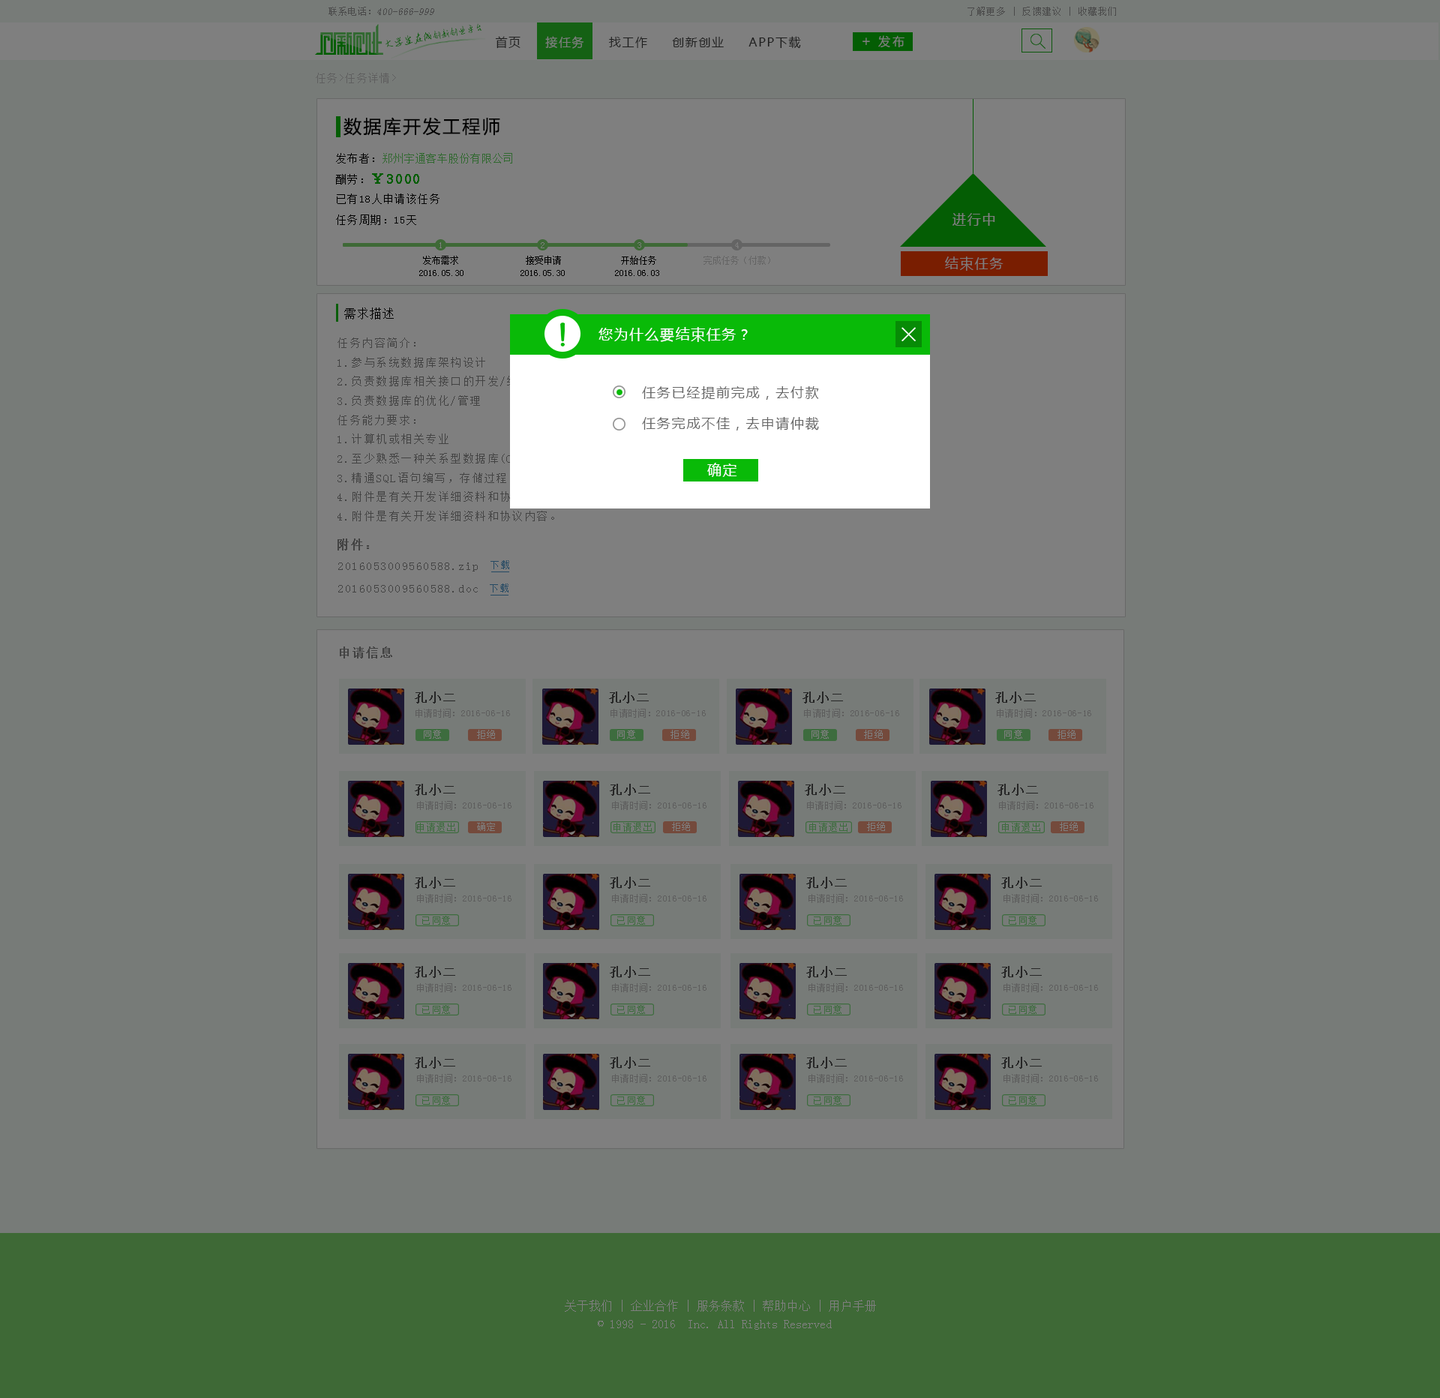
<style>
.page{position:relative;width:1440px;height:1398px;background:#777b78}
.page>*{position:absolute;margin:0}
.t1{font:10px "SimSun";color:#4a4a4a;font-style:italic}
.t2{font:10px "SimSun";color:#4a4a4a}
.t3{font:9px "SimSun";letter-spacing:0.1em;color:#4a4a4a}
.t4{font:9.3px "AnJingCheng-Xing-2.0";letter-spacing:-0.01em;color:#045d04}
.t5{font:10.4px "AnJingCheng-Xing-2.0";letter-spacing:-0.01em;color:#045d04}
.t6{font:12px "MicrosoftYaHei";letter-spacing:0.1em;color:#1f1f1f}
.t7{font:14px "MicrosoftYaHei";letter-spacing:0.2em;color:#7f7f7f}
.t8{font:12px "MicrosoftYaHei";letter-spacing:0.2em;color:#7f7f7f}
.t9{font:10.5px "SimSun";letter-spacing:0.1em;color:#5f5f5f}
.t10{font:18px "MicrosoftYaHei";letter-spacing:0.1em;color:#000000}
.t11{font:10.5px "SimSun";letter-spacing:0.05em;color:#316930}
.t12{font:10.5px "SimSun";letter-spacing:0.1em;color:#316930}
.t13{font:13.5px "SimSun";letter-spacing:0.1em;font-weight:bold}
.t14{font:10.5px "SimSun";letter-spacing:0.1em}
.t15{font:10.5px "SimSun";letter-spacing:0.1em;color:#000000}
.t16{font:13.5px "MicrosoftYaHei";letter-spacing:0.1em;color:#7f7f7f}
.t17{font:9px "SimSun";letter-spacing:0.1em;color:#7f7f7f}
.t18{font:9px "SimSun";color:#000000}
.t19{font:9px "SimSun";color:#646464}
.t20{font:13px "SimSun";color:#000000}
.t21{font:14px "MicrosoftYaHei";letter-spacing:0.1em;color:#ffffff}
.t22{font:11px "SimSun";letter-spacing:0.1em;color:#434343}
.t23{font:13.5px "MicrosoftYaHei";letter-spacing:0.1em;color:#676767}
.t24{font:12px "SimSun";letter-spacing:0.1em;color:#434343;font-weight:bold}
.t25{font:10px "SimSun";letter-spacing:0.1em;color:#254963}
.t26{font:12px "SimSun";letter-spacing:0.1em;color:#262626;font-weight:bold}
.t27{font:9px "SimSun";color:#5d5d5d}
.t28{font:9px "SimSun";letter-spacing:0.1em;color:#3d6c3e}
.t29{font:12px/18px "SimSun";color:#7f7f7f}
</style>
<div class="page">
<p class="t1" style="left:328px;top:7px;width:106px;height:9px"><span class="t2">联系电话：</span>400-666-999</p>
<p class="t3" style="left:967px;top:7px;width:149px;height:9px">了解更多 | 反馈建议 | 收藏我们</p>
<p class="t4" style="left:385px;top:23px;width:97px;height:24px;rotate:-10deg"><span class="t5">大学生在线</span>创新创业平台</p>
<p class="t6" style="left:495px;top:36px;width:306px;height:13px">首页     接任务     找工作     创新创业     APP下载</p>
<p class="t7" style="left:862px;top:37px;width:8px;height:8px">+</p>
<p class="t8" style="left:878px;top:35px;width:26px;height:12px">发布</p>
<p class="t9" style="left:316px;top:73px;width:80px;height:10px">任务&gt;任务详情&gt;</p>
<p class="t10" style="left:343px;top:117px;width:157px;height:19px">数据库开发工程师</p>
<p class="t11" style="left:336px;top:153px;width:176px;height:10px"><span class="t12">发布者：</span>郑州宇通客车股份有限公司</p>
<p class="t13" style="left:336px;top:173px;width:83px;height:11px"><span class="t14">酬劳：</span>￥3000</p>
<p class="t15" style="left:337px;top:193px;width:102px;height:11px">已有18人申请该任务</p>
<p class="t15" style="left:336px;top:214px;width:80px;height:11px">任务周期：15天</p>
<p class="t16" style="left:952px;top:213px;width:43px;height:13px">进行中</p>
<p class="t17" style="left:439px;top:242px;width:3px;height:6px">1</p>
<p class="t17" style="left:541px;top:242px;width:3px;height:6px">2</p>
<p class="t17" style="left:637px;top:242px;width:4px;height:6px">3</p>
<p class="t17" style="left:735px;top:242px;width:4px;height:6px">4</p>
<p class="t18" style="left:423px;top:256px;width:35px;height:9px">发布需求</p>
<p class="t18" style="left:526px;top:256px;width:35px;height:9px">接受申请</p>
<p class="t18" style="left:621px;top:256px;width:35px;height:9px">开始任务</p>
<p class="t19" style="left:703px;top:256px;width:67px;height:9px">完成任务（付款）</p>
<p class="t16" style="left:945px;top:256px;width:58px;height:15px">结束任务</p>
<p class="t18" style="left:419px;top:270px;width:44px;height:6px">2016.05.30</p>
<p class="t18" style="left:520px;top:270px;width:45px;height:6px">2016.05.30</p>
<p class="t18" style="left:615px;top:270px;width:44px;height:6px">2016.06.03</p>
<p class="t20" style="left:344px;top:307px;width:50px;height:12px">需求描述</p>
<p class="t21" style="left:598px;top:327px;width:150px;height:15px">您为什么要结束任务？</p>
<p class="t22" style="left:337px;top:337px;width:337px;height:184px">任务内容简介：<br>1.参与系统数据库架构设计<br>2.负责数据库相关接口的开发/维护<br>3.负责数据库的优化/管理<br>任务能力要求：<br>1.计算机或相关专业<br>2.至少熟悉一种关系型数据库(Orcle/Mysql/postgreSQL)；<br>3.精通SQL语句编写，存储过程。<br>4.附件是有关开发详细资料和协议内容。<br>4.附件是有关开发详细资料和协议内容。<br>4.附件是有关开发详细资料和协议内容。</p>
<p class="t23" style="left:642px;top:386px;width:177px;height:14px">任务已经提前完成，去付款</p>
<p class="t23" style="left:642px;top:416px;width:177px;height:14px">任务完成不佳，去申请仲裁</p>
<p class="t21" style="left:707px;top:463px;width:30px;height:14px">确定</p>
<p class="t24" style="left:337px;top:538px;width:32px;height:12px">附件：</p>
<p class="t22" style="left:338px;top:562px;width:140px;height:9px">2016053009560588.zip</p>
<p class="t25" style="left:490px;top:560px;width:19px;height:9px">下载</p>
<p class="t22" style="left:338px;top:585px;width:140px;height:7px">2016053009560588.doc</p>
<p class="t25" style="left:490px;top:583px;width:18px;height:9px">下载</p>
<p class="t24" style="left:340px;top:646px;width:52px;height:12px">申请信息</p>
<p class="t26" style="left:415px;top:691px;width:40px;height:12px">孔小二</p>
<p class="t26" style="left:609px;top:691px;width:40px;height:12px">孔小二</p>
<p class="t26" style="left:802px;top:691px;width:41px;height:12px">孔小二</p>
<p class="t26" style="left:995px;top:691px;width:41px;height:12px">孔小二</p>
<p class="t27" style="left:415px;top:709px;width:95px;height:9px">申请时间：2016-06-16</p>
<p class="t27" style="left:610px;top:709px;width:96px;height:9px">申请时间：2016-06-16</p>
<p class="t27" style="left:804px;top:709px;width:95px;height:9px">申请时间：2016-06-16</p>
<p class="t27" style="left:997px;top:709px;width:94px;height:9px">申请时间：2016-06-16</p>
<p class="t17" style="left:424px;top:730px;width:17px;height:9px">同意</p>
<p class="t17" style="left:477px;top:730px;width:18px;height:9px">拒绝</p>
<p class="t17" style="left:617px;top:730px;width:18px;height:9px">同意</p>
<p class="t17" style="left:670px;top:730px;width:19px;height:9px">拒绝</p>
<p class="t17" style="left:811px;top:730px;width:18px;height:9px">同意</p>
<p class="t17" style="left:864px;top:730px;width:19px;height:9px">拒绝</p>
<p class="t17" style="left:1004px;top:730px;width:18px;height:9px">同意</p>
<p class="t17" style="left:1057px;top:730px;width:18px;height:9px">拒绝</p>
<p class="t26" style="left:415px;top:784px;width:40px;height:12px">孔小二</p>
<p class="t26" style="left:610px;top:784px;width:40px;height:12px">孔小二</p>
<p class="t26" style="left:805px;top:784px;width:40px;height:12px">孔小二</p>
<p class="t26" style="left:997px;top:784px;width:41px;height:12px">孔小二</p>
<p class="t27" style="left:417px;top:801px;width:94px;height:9px">申请时间：2016-06-16</p>
<p class="t27" style="left:612px;top:801px;width:94px;height:9px">申请时间：2016-06-16</p>
<p class="t27" style="left:807px;top:801px;width:94px;height:9px">申请时间：2016-06-16</p>
<p class="t27" style="left:999px;top:801px;width:94px;height:9px">申请时间：2016-06-16</p>
<p class="t17" style="left:477px;top:822px;width:18px;height:9px">确定</p>
<p class="t17" style="left:672px;top:822px;width:18px;height:9px">拒绝</p>
<p class="t17" style="left:867px;top:822px;width:18px;height:9px">拒绝</p>
<p class="t17" style="left:1060px;top:822px;width:18px;height:9px">拒绝</p>
<p class="t28" style="left:417px;top:823px;width:38px;height:9px">申请退出</p>
<p class="t28" style="left:613px;top:823px;width:39px;height:9px">申请退出</p>
<p class="t28" style="left:809px;top:823px;width:38px;height:9px">申请退出</p>
<p class="t28" style="left:1002px;top:823px;width:38px;height:9px">申请退出</p>
<p class="t26" style="left:415px;top:877px;width:40px;height:12px">孔小二</p>
<p class="t26" style="left:610px;top:877px;width:40px;height:12px">孔小二</p>
<p class="t26" style="left:806px;top:877px;width:41px;height:12px">孔小二</p>
<p class="t26" style="left:1001px;top:877px;width:41px;height:12px">孔小二</p>
<p class="t27" style="left:417px;top:894px;width:94px;height:9px">申请时间：2016-06-16</p>
<p class="t27" style="left:612px;top:894px;width:94px;height:9px">申请时间：2016-06-16</p>
<p class="t27" style="left:808px;top:894px;width:95px;height:9px">申请时间：2016-06-16</p>
<p class="t27" style="left:1003px;top:894px;width:95px;height:9px">申请时间：2016-06-16</p>
<p class="t28" style="left:422px;top:916px;width:28px;height:9px">已同意</p>
<p class="t28" style="left:617px;top:916px;width:28px;height:9px">已同意</p>
<p class="t28" style="left:814px;top:916px;width:27px;height:9px">已同意</p>
<p class="t28" style="left:1009px;top:916px;width:27px;height:9px">已同意</p>
<p class="t26" style="left:415px;top:966px;width:40px;height:12px">孔小二</p>
<p class="t26" style="left:610px;top:966px;width:40px;height:12px">孔小二</p>
<p class="t26" style="left:806px;top:966px;width:41px;height:12px">孔小二</p>
<p class="t26" style="left:1001px;top:966px;width:41px;height:12px">孔小二</p>
<p class="t27" style="left:417px;top:983px;width:94px;height:9px">申请时间：2016-06-16</p>
<p class="t27" style="left:612px;top:983px;width:94px;height:9px">申请时间：2016-06-16</p>
<p class="t27" style="left:808px;top:983px;width:95px;height:9px">申请时间：2016-06-16</p>
<p class="t27" style="left:1003px;top:983px;width:95px;height:9px">申请时间：2016-06-16</p>
<p class="t28" style="left:422px;top:1005px;width:28px;height:9px">已同意</p>
<p class="t28" style="left:617px;top:1005px;width:28px;height:9px">已同意</p>
<p class="t28" style="left:814px;top:1005px;width:27px;height:9px">已同意</p>
<p class="t28" style="left:1009px;top:1005px;width:27px;height:9px">已同意</p>
<p class="t26" style="left:415px;top:1057px;width:40px;height:12px">孔小二</p>
<p class="t26" style="left:610px;top:1057px;width:40px;height:12px">孔小二</p>
<p class="t26" style="left:806px;top:1057px;width:41px;height:12px">孔小二</p>
<p class="t26" style="left:1001px;top:1057px;width:41px;height:12px">孔小二</p>
<p class="t27" style="left:417px;top:1074px;width:94px;height:9px">申请时间：2016-06-16</p>
<p class="t27" style="left:612px;top:1074px;width:94px;height:9px">申请时间：2016-06-16</p>
<p class="t27" style="left:808px;top:1074px;width:95px;height:9px">申请时间：2016-06-16</p>
<p class="t27" style="left:1003px;top:1074px;width:95px;height:9px">申请时间：2016-06-16</p>
<p class="t28" style="left:422px;top:1096px;width:28px;height:9px">已同意</p>
<p class="t28" style="left:617px;top:1096px;width:28px;height:9px">已同意</p>
<p class="t28" style="left:814px;top:1096px;width:27px;height:9px">已同意</p>
<p class="t28" style="left:1009px;top:1096px;width:27px;height:9px">已同意</p>
<p class="t29" style="left:565px;top:1300px;width:311px;height:30px;text-align:center">关于我们 | 企业合作 | 服务条款 | 帮助中心 | 用户手册<br>© 1998 - 2016  Inc. All Rights Reserved</p>
</div>
